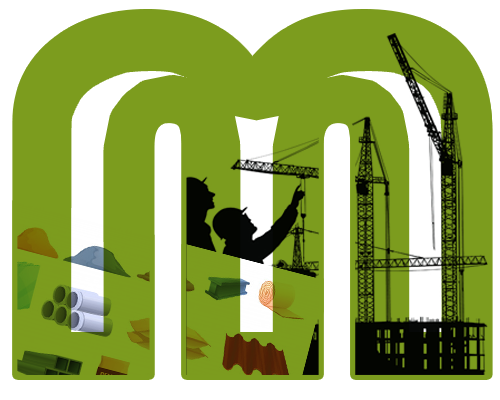
<style>
.page{position:relative;width:500px;height:400px;background:#7c9c1e}
.page>*{position:absolute;margin:0}
.t1{font:527.8px "Bauhaus93";scale:1.26 1}
</style>
<div class="page">
<p class="t1" style="left:17px;top:14px;width:471px;height:361px">M</p>
</div>
